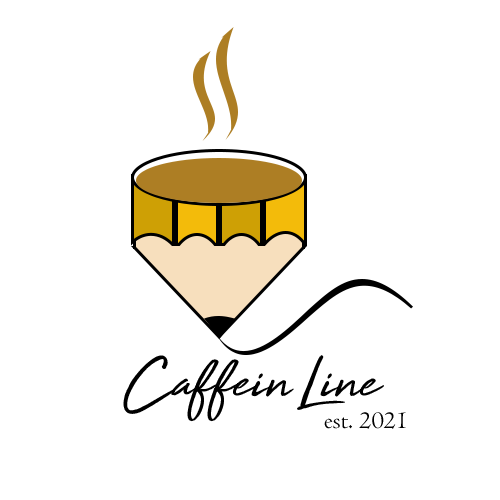
<style>
.page{position:relative;width:500px;height:500px;background:#ffffff}
.page>*{position:absolute;margin:0}
.t1{font:65.7px "HighTide";color:#000000}
.t2{font:25px "Centaur";color:#000000}
</style>
<div class="page">
<p class="t1" style="left:123px;top:355px;width:261px;height:67px">Caffein Line</p>
<p class="t2" style="left:324px;top:412px;width:82px;height:17px">est. 2021</p>
</div>
